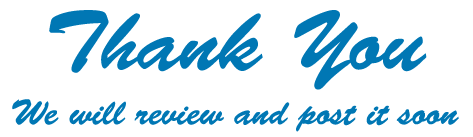
<style>
.page{position:relative;width:473px;height:137px;background:#ffffff}
.page>*{position:absolute;margin:0}
.t1{font:85px "BrushScriptStd";color:#0077b4}
.t2{font:36px "BrushScriptStd";color:#0077b4}
</style>
<div class="page">
<p class="t1" style="left:49px;top:10px;width:378px;height:80px">Thank You</p>
<p class="t2" style="left:12px;top:99px;width:447px;height:33px">We will review and post it soon</p>
</div>
